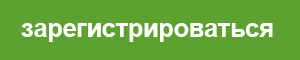
<style>
.page{position:relative;width:300px;height:60px;background:#5da130}
.page>*{position:absolute;margin:0}
.t1{font:26px "Arial-BoldMT";letter-spacing:-0.025em;color:#ffffff}
</style>
<div class="page">
<p class="t1" style="left:21px;top:23px;width:252px;height:19px">зарегистрироваться</p>
</div>
